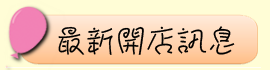
<style>
.page{position:relative;width:270px;height:70px;background:#fffdd6}
.page>*{position:absolute;margin:0}
.t1{font:30.5px "DFLianLian-W4-HK-BF";color:#010101}
</style>
<div class="page">
<p class="t1" style="left:58px;top:26px;width:177px;height:29px">最新開店訊息</p>
</div>
